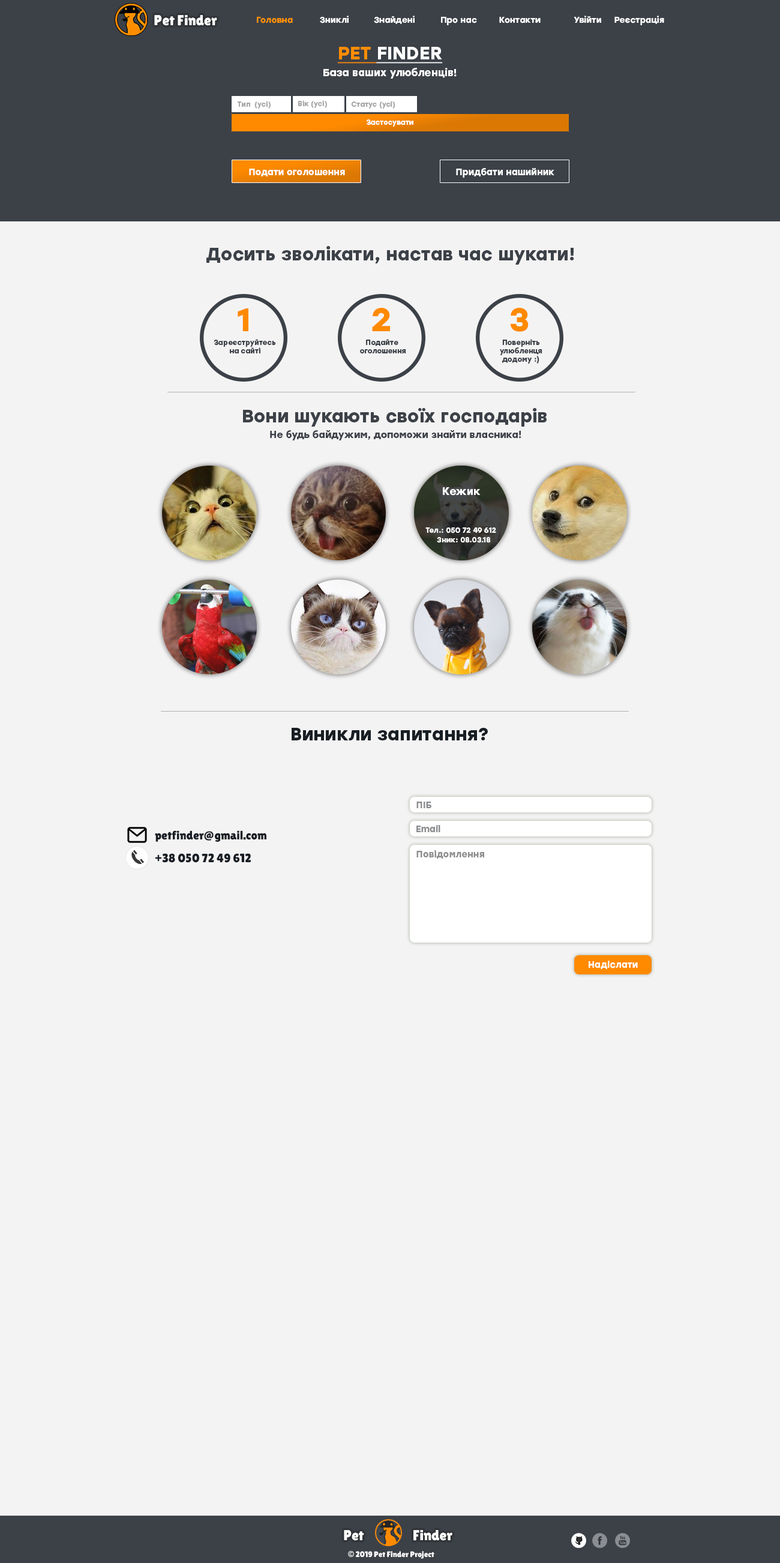
<style>
.page{position:relative;width:780px;height:1563px;background:#f4f3f3}
.page>*{position:absolute;margin:0}
.t1{font:14.4px "LilitaOne";color:#ffffff}
.t2{font:8.5px "Stolzl-Bold";color:#ff9001}
.t3{font:8.5px "Stolzl-Bold";color:#ffffff}
.t4{font:10.2px/16.8px "Stolzl-Bold";color:#ffffff}
.t5{font:18px/16.8px "Stolzl-Bold";color:#ff8d00;text-decoration:underline}
.t6{font:18px/16.8px "Stolzl-Bold";color:#ffffff;text-decoration:underline}
.t7{font:6.9px "Stolzl-Bold";color:#a6a8a9}
.t8{font:7.1px "Stolzl-Bold";color:#ffffff}
.t9{font:9px "Stolzl-Bold";color:#ffffff}
.t10{font:18px "Stolzl-Bold";color:#3c4148}
.t11{font:32.6px "Stolzl-Bold";color:#ff8a00}
.t12{font:7.1px "Stolzl-Bold";color:#3c4148}
.t13{font:9.6px "Stolzl-Bold";color:#3c4148}
.t14{font:10.8px "Stolzl-Bold";color:#ffffff}
.t15{font:7.2px "Stolzl-Bold";color:#ffffff}
.t16{font:18px "Stolzl-Bold";color:#181e24}
.t17{font:9px "Stolzl-Bold";color:#8d8e90}
.t18{font:12.1px "LilitaOne";color:#181e24}
.t19{font:8px "LilitaOne";color:#ffffff}
.t20{font:8px "GillSans-UltraBold";color:#ffffff}
</style>
<div class="page">
<p class="t1" style="left:154px;top:15px;width:63px;height:11px">Pet Finder</p>
<p class="t2" style="left:257px;top:17px;width:36px;height:6px">Головна</p>
<p class="t3" style="left:320px;top:16px;width:29px;height:7px">Зниклі</p>
<p class="t3" style="left:374px;top:16px;width:41px;height:8px">Знайдені</p>
<p class="t3" style="left:441px;top:17px;width:36px;height:8px">Про нас</p>
<p class="t3" style="left:499px;top:17px;width:42px;height:6px">Контакти</p>
<p class="t3" style="left:574px;top:16px;width:27px;height:7px">Увійти</p>
<p class="t3" style="left:614px;top:16px;width:50px;height:9px">Реєстрація</p>
<p class="t4" style="left:323px;top:47px;width:134px;height:32px;text-align:center"><span class="t5">PET </span><span class="t6">FINDER<br></span>База ваших улюбленців!</p>
<p class="t7" style="left:237px;top:101px;width:34px;height:8px">Тип  (усі)</p>
<p class="t7" style="left:298px;top:100px;width:29px;height:8px">Вік (усі)</p>
<p class="t7" style="left:351px;top:101px;width:44px;height:8px">Статус (усі)</p>
<p class="t7" style="left:351px;top:101px;width:44px;height:8px">Статус (усі)</p>
<p class="t8" style="left:367px;top:119px;width:46px;height:8px">Застосувати</p>
<p class="t9" style="left:249px;top:169px;width:96px;height:7px">Подати оголошення</p>
<p class="t9" style="left:456px;top:168px;width:98px;height:10px">Придбати нашийник</p>
<p class="t10" style="left:206px;top:246px;width:368px;height:19px">Досить зволікати, настав час шукати!</p>
<p class="t11" style="left:238px;top:308px;width:10px;height:23px">1</p>
<p class="t11" style="left:372px;top:308px;width:18px;height:23px">2</p>
<p class="t11" style="left:510px;top:308px;width:19px;height:24px">3</p>
<p class="t12" style="left:214px;top:339px;width:62px;height:15px;text-align:center">Зареєструйтесь<br>на сайті</p>
<p class="t12" style="left:360px;top:339px;width:46px;height:15px;text-align:center">Подайте <br>оголошення</p>
<p class="t12" style="left:500px;top:339px;width:42px;height:25px;text-align:center">Поверніть<br>улюбленця<br>додому :)</p>
<p class="t10" style="left:243px;top:408px;width:304px;height:19px">Вони шукають своїх господарів</p>
<p class="t13" style="left:270px;top:430px;width:251px;height:10px">Не будь байдужим, допоможи знайти власника!</p>
<p class="t14" style="left:443px;top:487px;width:38px;height:9px">Кежик</p>
<p class="t15" style="left:425px;top:527px;width:71px;height:6px">Тел.: 050 72 49 612</p>
<p class="t15" style="left:437px;top:537px;width:54px;height:6px">Зник: 08.03.18</p>
<p class="t16" style="left:292px;top:728px;width:196px;height:12px">Виникли запитання?</p>
<p class="t17" style="left:416px;top:802px;width:15px;height:6px">ПІБ</p>
<p class="t18" style="left:155px;top:830px;width:111px;height:12px">petfinder@gmail.com</p>
<p class="t17" style="left:416px;top:825px;width:24px;height:7px">Email</p>
<p class="t18" style="left:155px;top:853px;width:96px;height:10px">+38 050 72 49 612</p>
<p class="t17" style="left:416px;top:850px;width:68px;height:9px">Повідомлення</p>
<p class="t9" style="left:589px;top:961px;width:49px;height:8px">Надіслати</p>
<p class="t1" style="left:344px;top:1530px;width:20px;height:11px">Pet</p>
<p class="t1" style="left:413px;top:1530px;width:39px;height:11px">Finder</p>
<p class="t19" style="left:348px;top:1551px;width:86px;height:8px"><span class="t20">©</span> 2019 Pet Finder Project</p>
</div>
